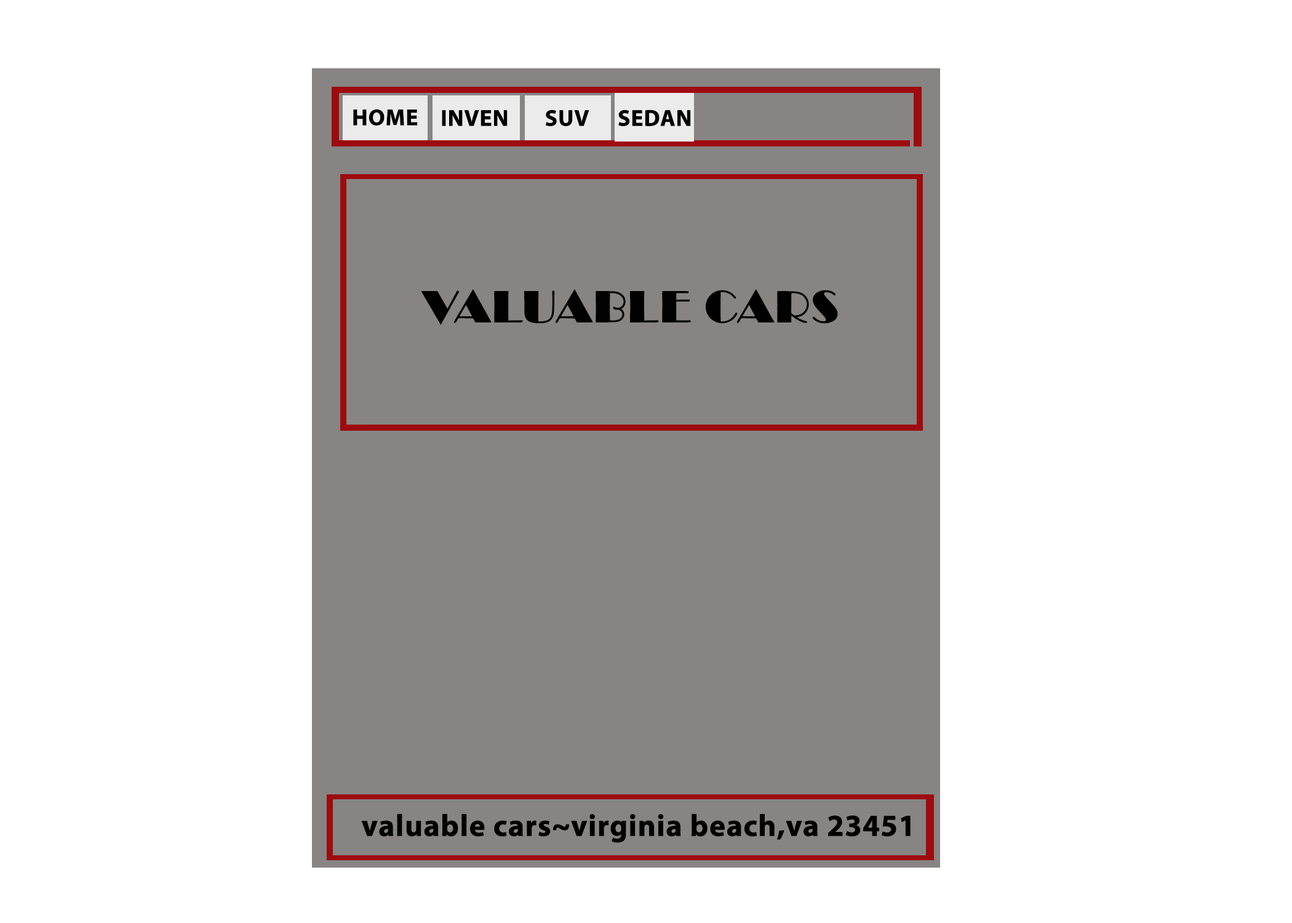
<style>
.page{position:relative;width:1292px;height:923px;background:#ffffff}
.page>*{position:absolute;margin:0}
.t1{font:23.1px "MyriadPro-Bold";color:#010101;font-weight:bold}
.t2{font:46.1px "Broadway";color:#010101;font-weight:bold}
.t3{font:30.8px "MyriadPro-Bold";color:#010101;font-weight:bold}
</style>
<div class="page">
<p class="t1" style="left:353px;top:109px;width:65px;height:17px">HOME</p>
<p class="t1" style="left:442px;top:110px;width:66px;height:16px">INVEN</p>
<p class="t1" style="left:546px;top:110px;width:43px;height:16px">SUV</p>
<p class="t1" style="left:618px;top:110px;width:73px;height:16px">SEDAN</p>
<p class="t2" style="left:421px;top:289px;width:417px;height:36px">VALUABLE CARS</p>
<p class="t3" style="left:361px;top:813px;width:550px;height:30px">valuable cars~virginia beach,va 23451</p>
</div>
